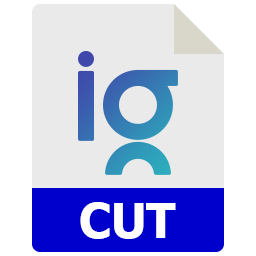
<style>
.page{position:relative;width:256px;height:256px;background:#eaeaea}
.page>*{position:absolute;margin:0}
.t1{font:48px "Tahoma-Bold";color:#ffffff}
</style>
<div class="page">
<p class="t1" style="left:80px;top:202px;width:96px;height:37px">CUT</p>
</div>
